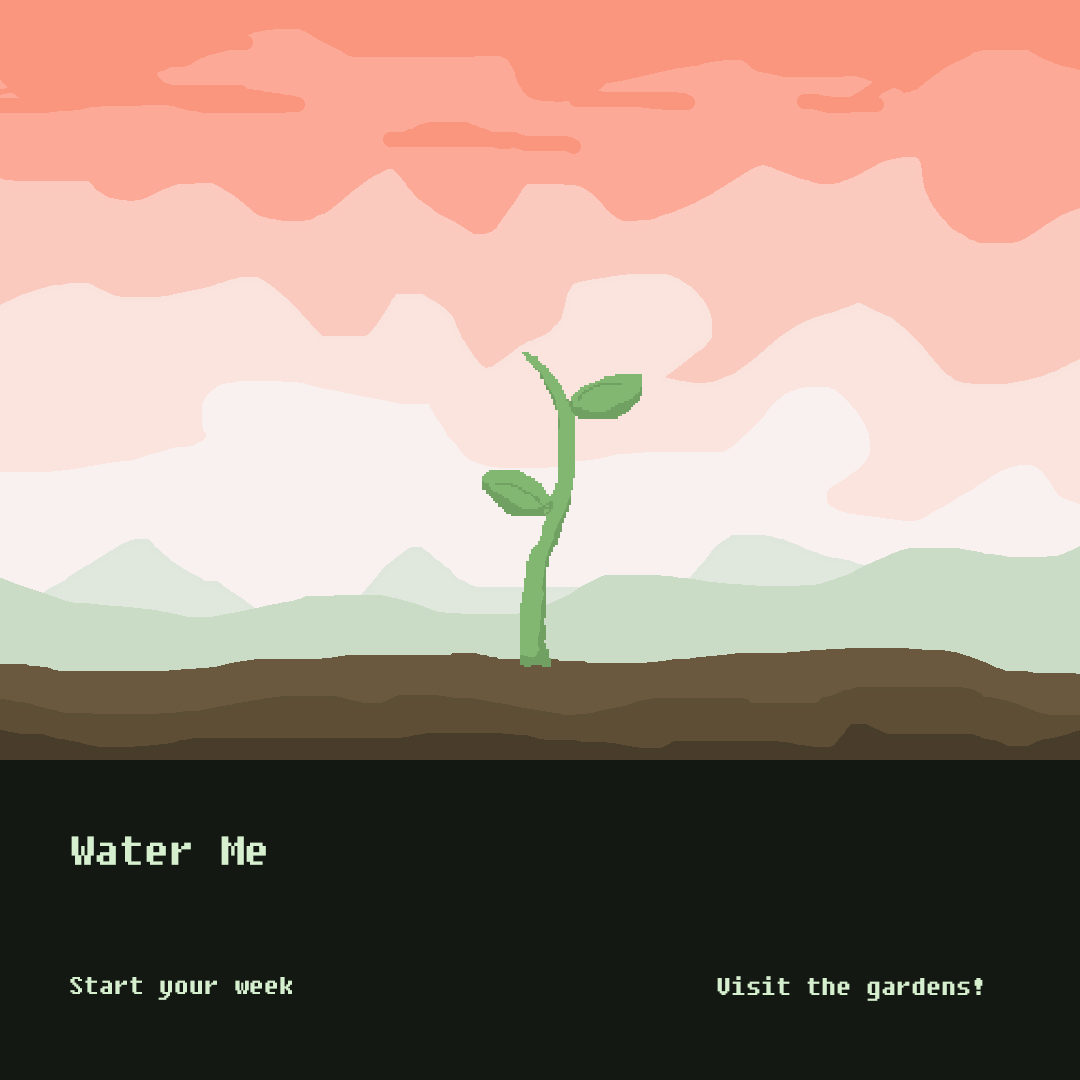
<style>
.page{position:relative;width:1080px;height:1080px;background:#141813}
.page>*{position:absolute;margin:0}
.t1{font:50px "FixedsysExcelsiorIIIb";color:#d6f0cf}
.t2{font:30px "FixedsysExcelsiorIIIb";color:#d6f0cf}
</style>
<div class="page">
<p class="t1" style="left:71px;top:836px;width:195px;height:29px">Water Me</p>
<p class="t2" style="left:70px;top:977px;width:222px;height:23px">Start your week</p>
<p class="t2" style="left:717px;top:976px;width:266px;height:25px">Visit the gardens!</p>
</div>
